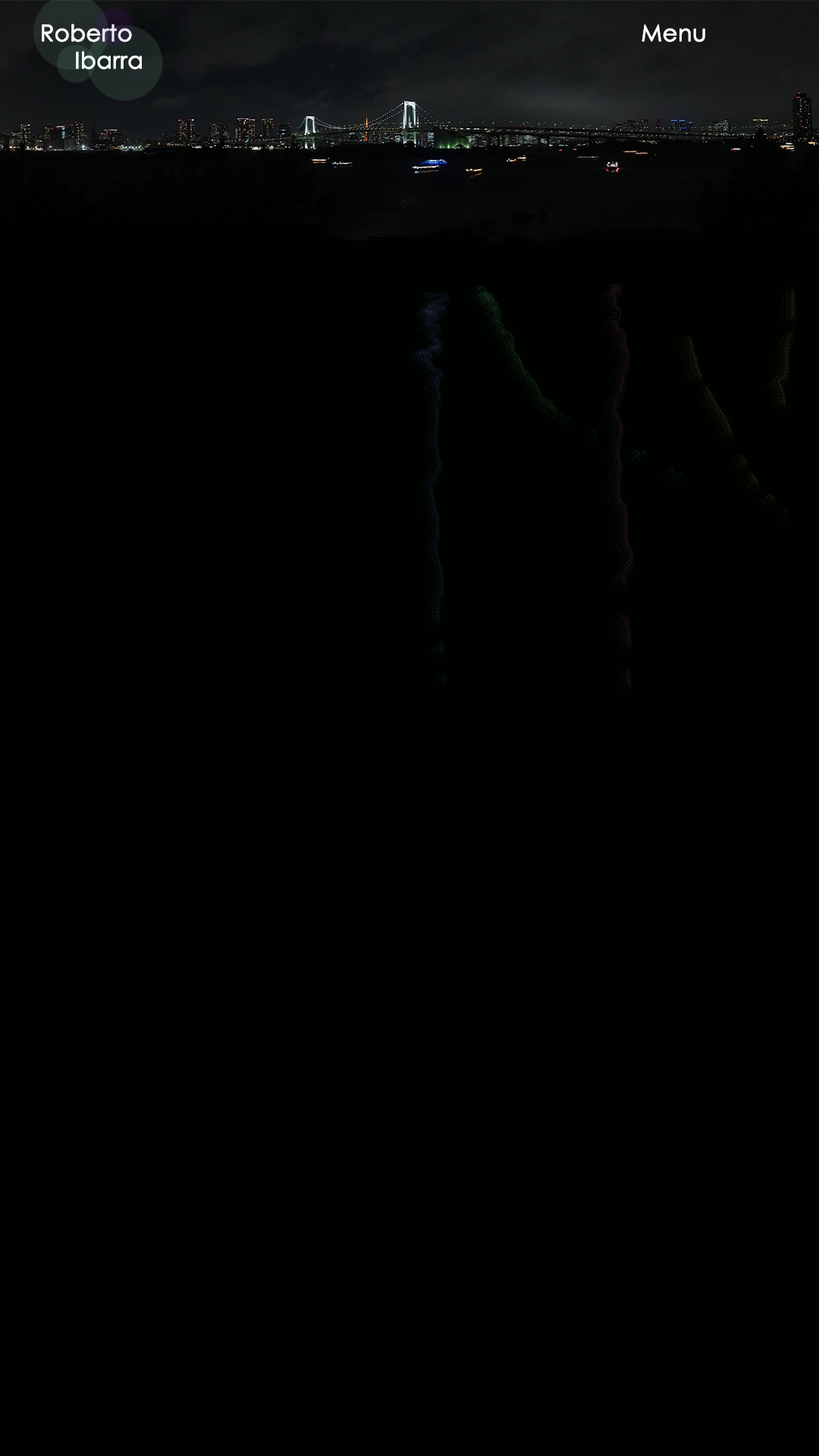
<style>
.page{position:relative;width:819px;height:1456px;background:#000200}
.page>*{position:absolute;margin:0}
.t1{font:22.7px "CenturyGothic";color:#ffffff;font-weight:bold}
</style>
<div class="page">
<p class="t1" style="left:42px;top:24px;width:100px;height:46px">Roberto <br>     Ibarra</p>
<p class="t1" style="left:642px;top:24px;width:63px;height:18px">Menu</p>
</div>
